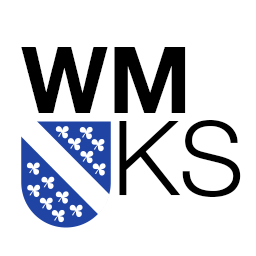
<style>
.page{position:relative;width:256px;height:256px;background:#ffffff}
.page>*{position:absolute;margin:0}
.t1{font:102.6px/82px "HelveticaNeue-Light";color:#000000}
.t2{font:92.3px/86px "HelveticaNeue-Bold";color:#000000}
.t3{font:92.3px/82px "HelveticaNeue-Bold";color:#000000}
</style>
<div class="page">
<p class="t1" style="left:21px;top:47px;width:220px;height:150px;text-align:right"><span class="t2">W</span><span class="t3">M<br></span>KS</p>
</div>
